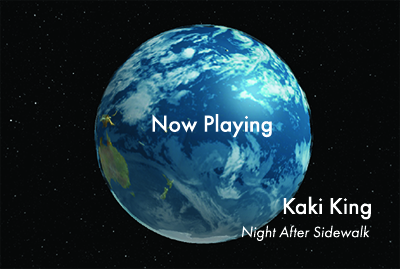
<style>
.page{position:relative;width:400px;height:269px;background:#060808}
.page>*{position:absolute;margin:0}
.t1{font:23.8px "FuturaPT-Medium";color:#ffffff}
.t2{font:15.9px "FuturaPT-BookObl";color:#ffffff}
</style>
<div class="page">
<p class="t1" style="left:152px;top:114px;width:120px;height:24px">Now Playing</p>
<p class="t1" style="left:283px;top:196px;width:88px;height:24px">Kaki King</p>
<p class="t2" style="left:241px;top:225px;width:129px;height:16px">Night After Sidewalk</p>
</div>
